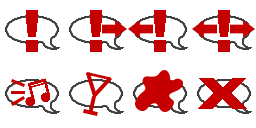
<style>
.page{position:relative;width:256px;height:128px;background:#ffffff}
.page>*{position:absolute;margin:0}
.t1{font:59.3px "Arial-Black";color:#c60000}
.t2{font:42.9px "Arial-Black";color:#c60000;scale:1.49 1}
</style>
<div class="page">
<p class="t1" style="left:26px;top:10px;width:12px;height:42px">!</p>
<p class="t1" style="left:90px;top:10px;width:12px;height:42px">!</p>
<p class="t1" style="left:154px;top:10px;width:12px;height:42px">!</p>
<p class="t1" style="left:218px;top:10px;width:12px;height:42px">!</p>
<p class="t2" style="left:198px;top:78px;width:49px;height:31px">X</p>
</div>
